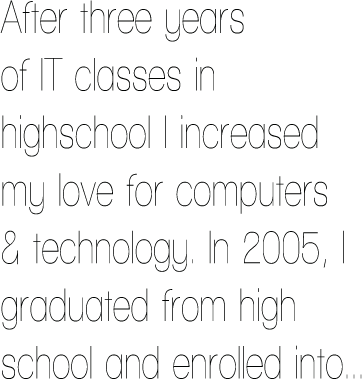
<style>
.page{position:relative;width:362px;height:379px;background:#ffffff}
.page>*{position:absolute;margin:0}
.t1{font:48px "WalkwayCondensed";color:#000201}
</style>
<div class="page">
<p class="t1" style="left:0px;top:0px;width:362px;height:379px">After three years <br>of IT classes in <br>highschool I increased <br>my love for computers <br>&amp; technology. In 2005, I <br>graduated from high <br>school and enrolled into...</p>
</div>
